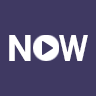
<style>
.page{position:relative;width:96px;height:96px;background:#3f3962}
.page>*{position:absolute;margin:0}
.t1{font:30px "BMDoHyeon";color:#ffffff;scale:1.2 1}
.t2{font:30.3px "BMDoHyeon";color:#ffffff;scale:0.92 1}
</style>
<div class="page">
<p class="t1" style="left:9px;top:35px;width:22px;height:26px">N</p>
<p class="t2" style="left:59px;top:35px;width:29px;height:26px">W</p>
</div>
